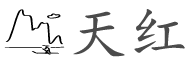
<style>
.page{position:relative;width:192px;height:64px;background:#ffffff}
.page>*{position:absolute;margin:0}
.t1{font:60px "KaiTi";color:#4b4b4b}
</style>
<div class="page">
<p class="t1" style="left:73px;top:9px;width:112px;height:48px">天红</p>
</div>
